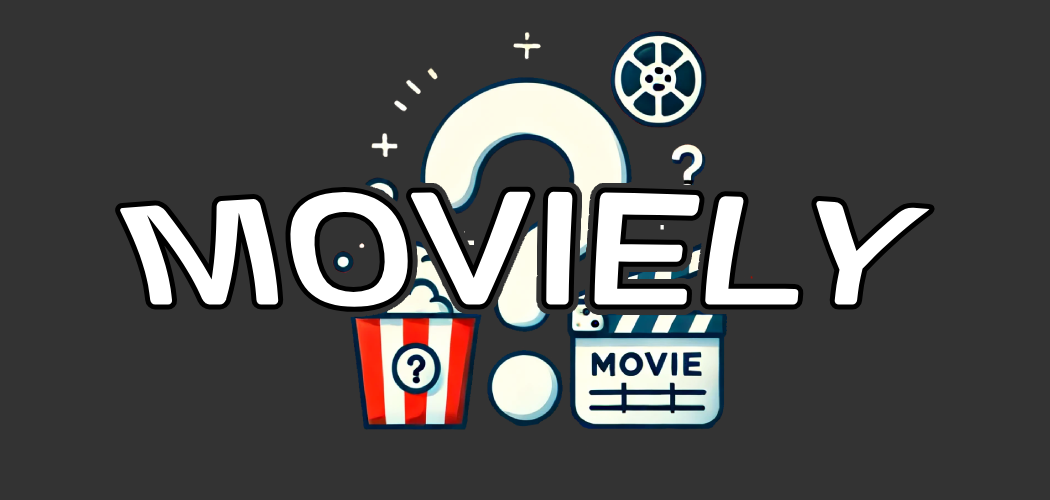
<style>
.page{position:relative;width:1050px;height:500px;background:#333333}
.page>*{position:absolute;margin:0}
.t1{font:150px "DaysOne-Regular";color:#ffffff}
</style>
<div class="page">
<p class="t1" style="left:114px;top:186px;width:822px;height:127px">MOVIELY</p>
</div>
